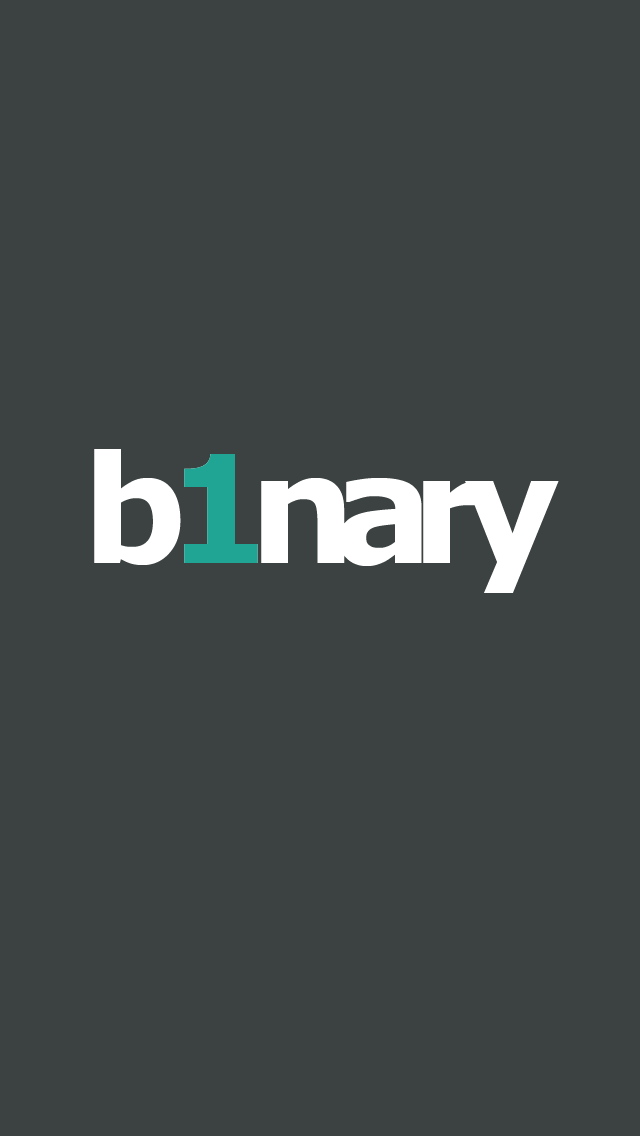
<style>
.page{position:relative;width:640px;height:1136px;background:#3b4241}
.page>*{position:absolute;margin:0}
.t1{font:150px "Verdana-Bold";letter-spacing:-0.15em;color:#ffffff}
.t2{font:150px "Verdana-Bold";letter-spacing:-0.15em;color:#20a493}
</style>
<div class="page">
<p class="t1" style="left:94px;top:449px;width:465px;height:144px">b1nary</p>
<p class="t2" style="left:184px;top:454px;width:74px;height:109px">1</p>
</div>
